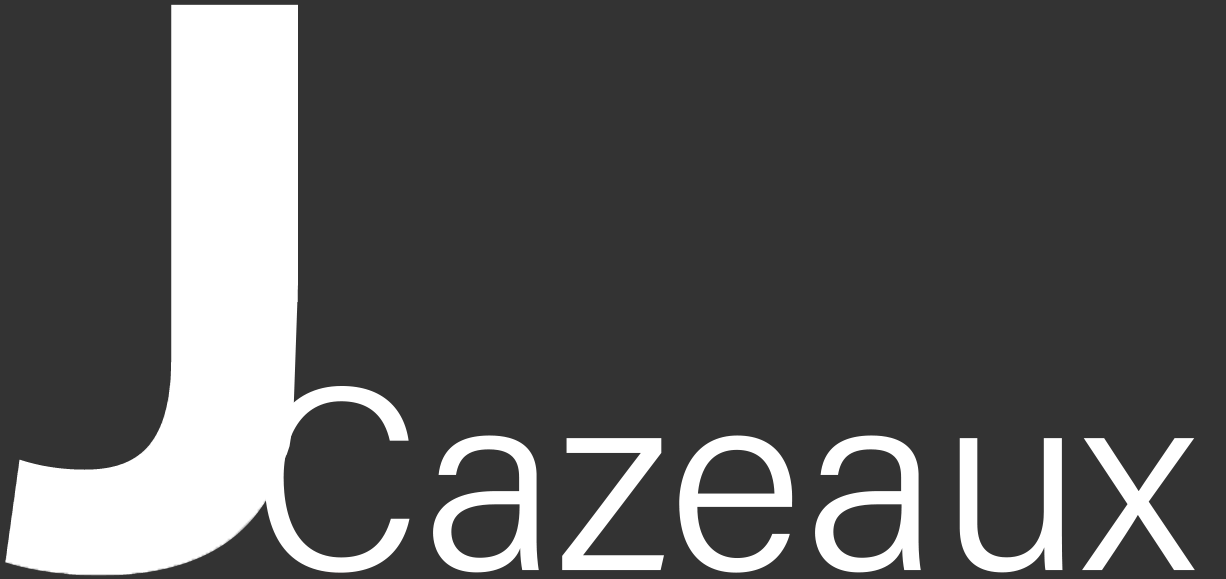
<style>
.page{position:relative;width:1226px;height:579px;background:#333333}
.page>*{position:absolute;margin:0}
.t1{font:262px "AcuminConcept-SemiCondensedLight";color:#ffffff;font-weight:bold;scale:1.06 1}
</style>
<div class="page">
<p class="t1" style="left:264px;top:386px;width:931px;height:187px">Cazeaux</p>
</div>
